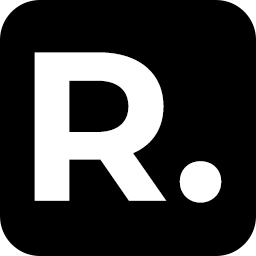
<style>
.page{position:relative;width:256px;height:256px;background:#000000}
.page>*{position:absolute;margin:0}
.t1{font:211.7px "Montserrat-Bold";color:#ffffff}
</style>
<div class="page">
<p class="t1" style="left:34px;top:52px;width:188px;height:151px">R.</p>
</div>
